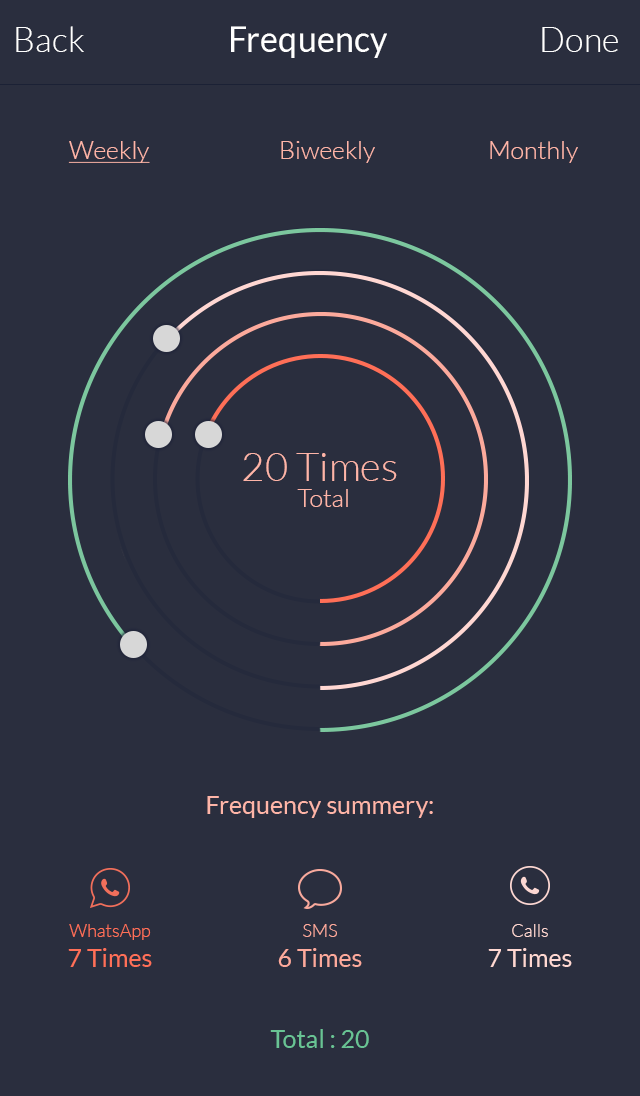
<style>
.page{position:relative;width:640px;height:1096px;background:#2a2e3e}
.page>*{position:absolute;margin:0}
.t1{font:35px "Lato-Light";color:#ffffff}
.t2{font:35px "Lato-Regular";color:#ffffff}
.t3{font:24.8px "Lato-Light";color:#feb5a8;text-decoration:underline}
.t4{font:24.8px "Lato-Light";color:#feb5a8}
.t5{font:40px "Lato-Light";color:#feb5a8}
.t6{font:25px/26px "Lato-Light";color:#feb5a8}
.t7{font:25px "Lato-Regular";color:#feb5a8}
.t8{font:18px "Lato-Light";color:#ff7058}
.t9{font:18px "Lato-Light";color:#fdaa9c}
.t10{font:18px "Lato-Light";color:#ffd8d2}
.t11{font:25px "Lato-Regular";color:#ff7058}
.t12{font:25px "Lato-Regular";color:#fdaa9c}
.t13{font:25px "Lato-Regular";color:#ffd8d2}
.t14{font:25px "Lato-Regular";color:#69c394}
</style>
<div class="page">
<p class="t1" style="left:16px;top:26px;width:68px;height:26px">Back</p>
<p class="t2" style="left:231px;top:26px;width:156px;height:32px">Frequency</p>
<p class="t1" style="left:542px;top:27px;width:76px;height:25px">Done</p>
<p class="t3" style="left:68px;top:141px;width:82px;height:22px">Weekly</p>
<p class="t4" style="left:281px;top:141px;width:94px;height:22px">Biweekly</p>
<p class="t4" style="left:490px;top:141px;width:88px;height:22px">Monthly</p>
<p class="t5" style="left:243px;top:453px;width:154px;height:54px;text-align:center">20 Times<br> <span class="t6">Total</span></p>
<p class="t7" style="left:207px;top:796px;width:226px;height:22px">Frequency summery:</p>
<p class="t8" style="left:69px;top:924px;width:82px;height:16px">WhatsApp</p>
<p class="t9" style="left:303px;top:924px;width:34px;height:13px">SMS</p>
<p class="t10" style="left:512px;top:924px;width:36px;height:13px">Calls</p>
<p class="t11" style="left:68px;top:948px;width:84px;height:19px">7 Times</p>
<p class="t12" style="left:278px;top:948px;width:84px;height:19px">6 Times</p>
<p class="t13" style="left:488px;top:948px;width:84px;height:19px">7 Times</p>
<p class="t14" style="left:270px;top:1029px;width:99px;height:19px">Total : 20</p>
</div>
